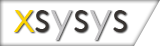
<style>
.page{position:relative;width:160px;height:46px;background:#ffffff}
.page>*{position:absolute;margin:0}
.t1{font:42px "CenturyGothic";color:#fad300}
.t2{font:42px "CenturyGothic";color:#373330}
.t3{font:42px "CenturyGothic";color:#c6c5c7}
</style>
<div class="page">
<p class="t1" style="left:13px;top:10px;width:114px;height:30px">x<span class="t2">s</span><span class="t3">y</span><span class="t2">s</span><span class="t3">y</span><span class="t2">s</span></p>
</div>
